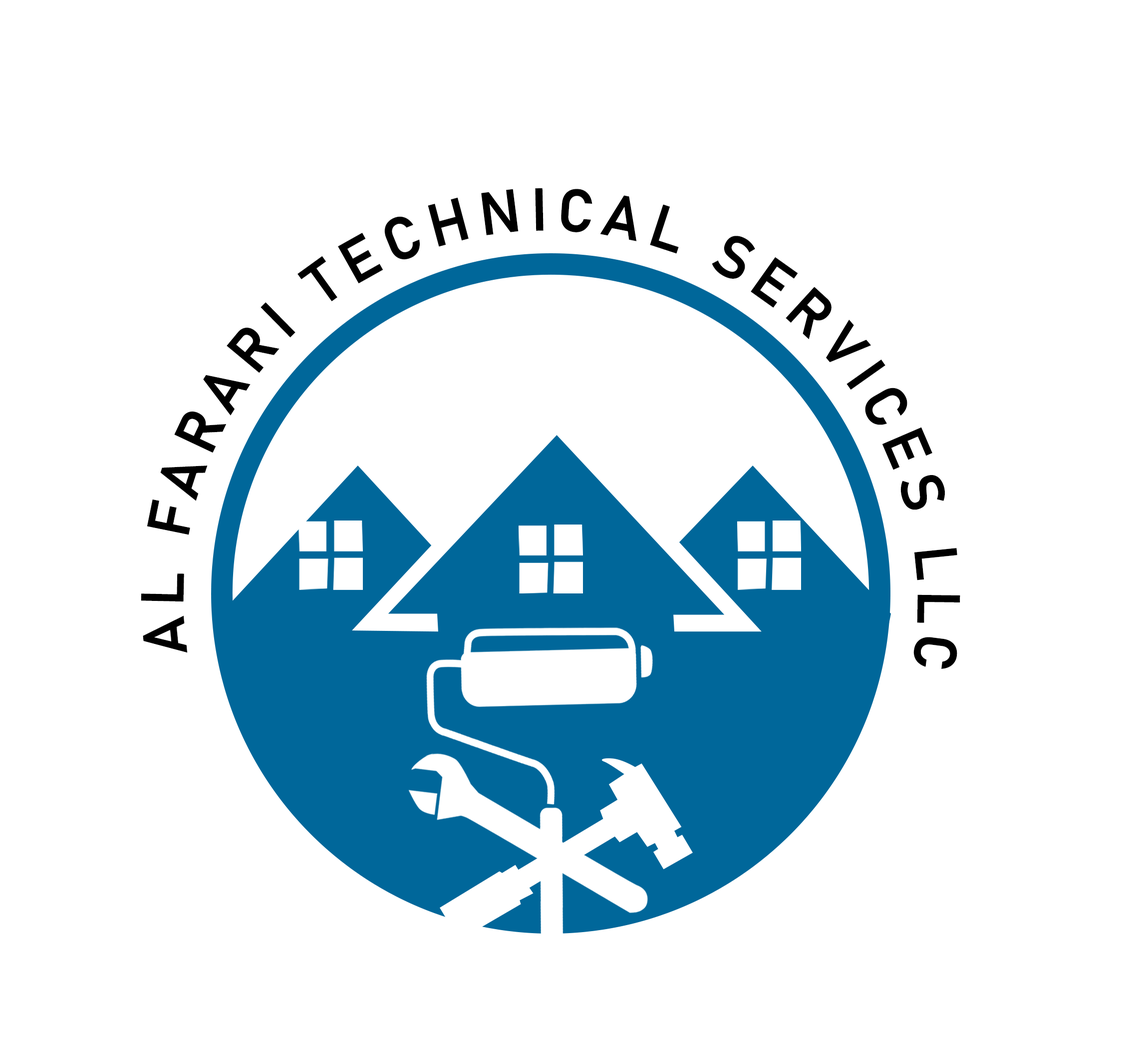
<style>
.page{position:relative;width:1126px;height:1059px;background:#ffffff}
.page>*{position:absolute;margin:0}
.t1{font:59.6px "Bahnschrift-SemiBold";letter-spacing:0.14em;color:#000000}
</style>
<div class="page">
<p class="t1" style="left:141px;top:188px;width:820px;height:481px;rotate:-27deg">AL FARARI TECHNICAL SERVICES LLC</p>
</div>
